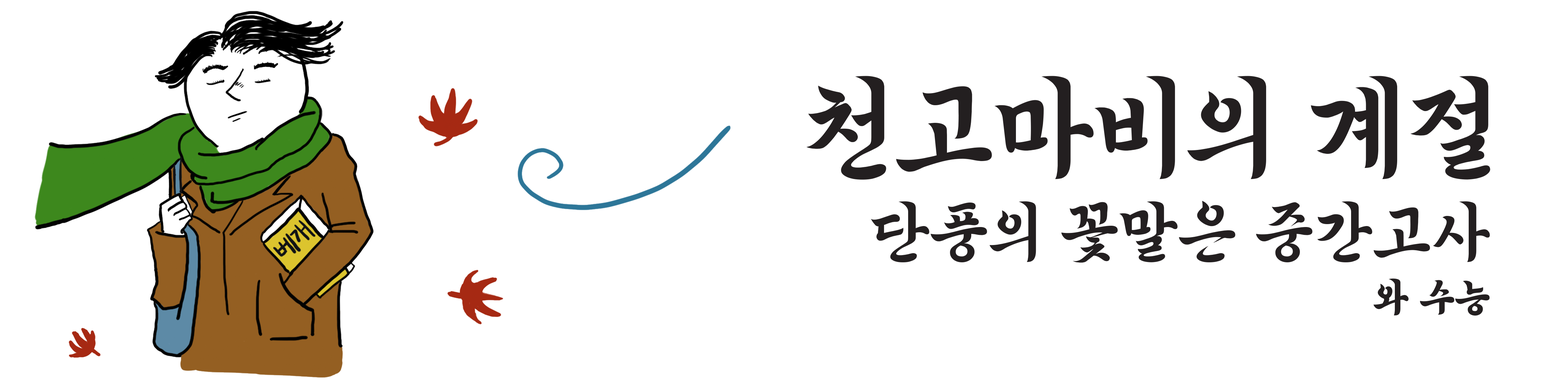
<style>
.page{position:relative;width:1568px;height:392px;background:#ffffff}
.page>*{position:absolute;margin:0}
.t1{font:111.1px "OTBaekdusanR";color:#231f20}
.t2{font:65.3px "OTBaekdusanR";color:#231f20}
.t3{font:39.2px "OTBaekdusanB";color:#231f20}
</style>
<div class="page">
<p class="t1" style="left:806px;top:76px;width:684px;height:104px">천고마비의 계절</p>
<p class="t2" style="left:871px;top:201px;width:619px;height:62px">단풍의 꽃말은 중간고사</p>
<p class="t3" style="left:1373px;top:278px;width:117px;height:38px">와 수능</p>
</div>
